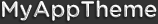
<style>
.page{position:relative;width:158px;height:24px;background:#333333}
.page>*{position:absolute;margin:0}
.t1{font:22.5px "GothamRounded-Medium"}
</style>
<div class="page">
<p class="t1" style="left:2px;top:0px;width:155px;height:21px">MyAppTheme</p>
</div>
